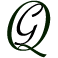
<style>
.page{position:relative;width:58px;height:58px;background:#ffffff}
.page>*{position:absolute;margin:0}
.t1{font:76px "SavoyeLetPlain";letter-spacing:0.025em;color:#041e00}
.t2{font:48px "SavoyeLetPlain";letter-spacing:0.025em;color:#000000;text-transform:uppercase;font-weight:bold;font-style:italic}
</style>
<div class="page">
<p class="t1" style="left:7px;top:0px;width:44px;height:58px">Q</p>
<p class="t2" style="left:14px;top:3px;width:29px;height:42px">G</p>
</div>
